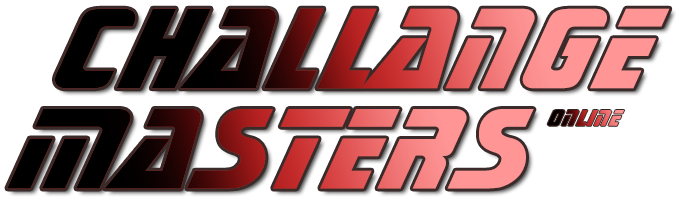
<style>
.page{position:relative;width:680px;height:200px;background:#ffffff}
.page>*{position:absolute;margin:0}
.t1{font:120px "SonicBT-ExtraBold"}
.t2{font:24px "SonicBT-ExtraBold"}
</style>
<div class="page">
<p class="t1" style="left:55px;top:8px;width:615px;height:81px">ChallanGe</p>
<p class="t1" style="left:7px;top:109px;width:527px;height:80px">Masters</p>
<p class="t2" style="left:547px;top:110px;width:78px;height:16px">Online</p>
</div>
